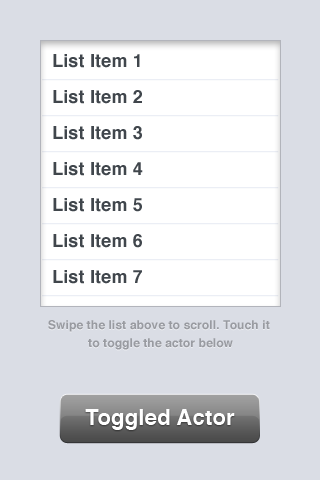
<style>
.page{position:relative;width:320px;height:480px;background:#dadde5}
.page>*{position:absolute;margin:0}
.t1{font:12px/18px "Helvetica-Bold";letter-spacing:0.01em;color:#999ba1}
.t2{font:22px "Helvetica-Bold";letter-spacing:0.01em;color:#ffffff}
</style>
<div class="page">
<p class="t1" style="left:48px;top:320px;width:222px;height:30px;text-align:center">Swipe the list above to scroll. Touch it <br>to toggle the actor below</p>
<p class="t2" style="left:85px;top:409px;width:150px;height:21px">Toggled Actor</p>
</div>
